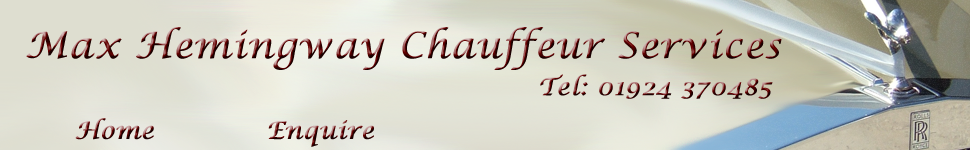
<style>
.page{position:relative;width:970px;height:150px}
.page>*{position:absolute;margin:0}
.t1{font:36px "LucidaCalligraphy-Italic";letter-spacing:0.011em;font-weight:bold}
.t2{font:24px "LucidaCalligraphy-Italic";letter-spacing:0.011em;font-weight:bold}
</style>
<div class="page">
<p class="t1" style="left:26px;top:27px;width:756px;height:43px">Max Hemingway Chauffeur Services</p>
<p class="t2" style="left:540px;top:74px;width:233px;height:25px">Tel: 01924 370485</p>
<p class="t2" style="left:75px;top:118px;width:79px;height:22px">Home</p>
<p class="t2" style="left:268px;top:120px;width:106px;height:27px">Enquire</p>
</div>
